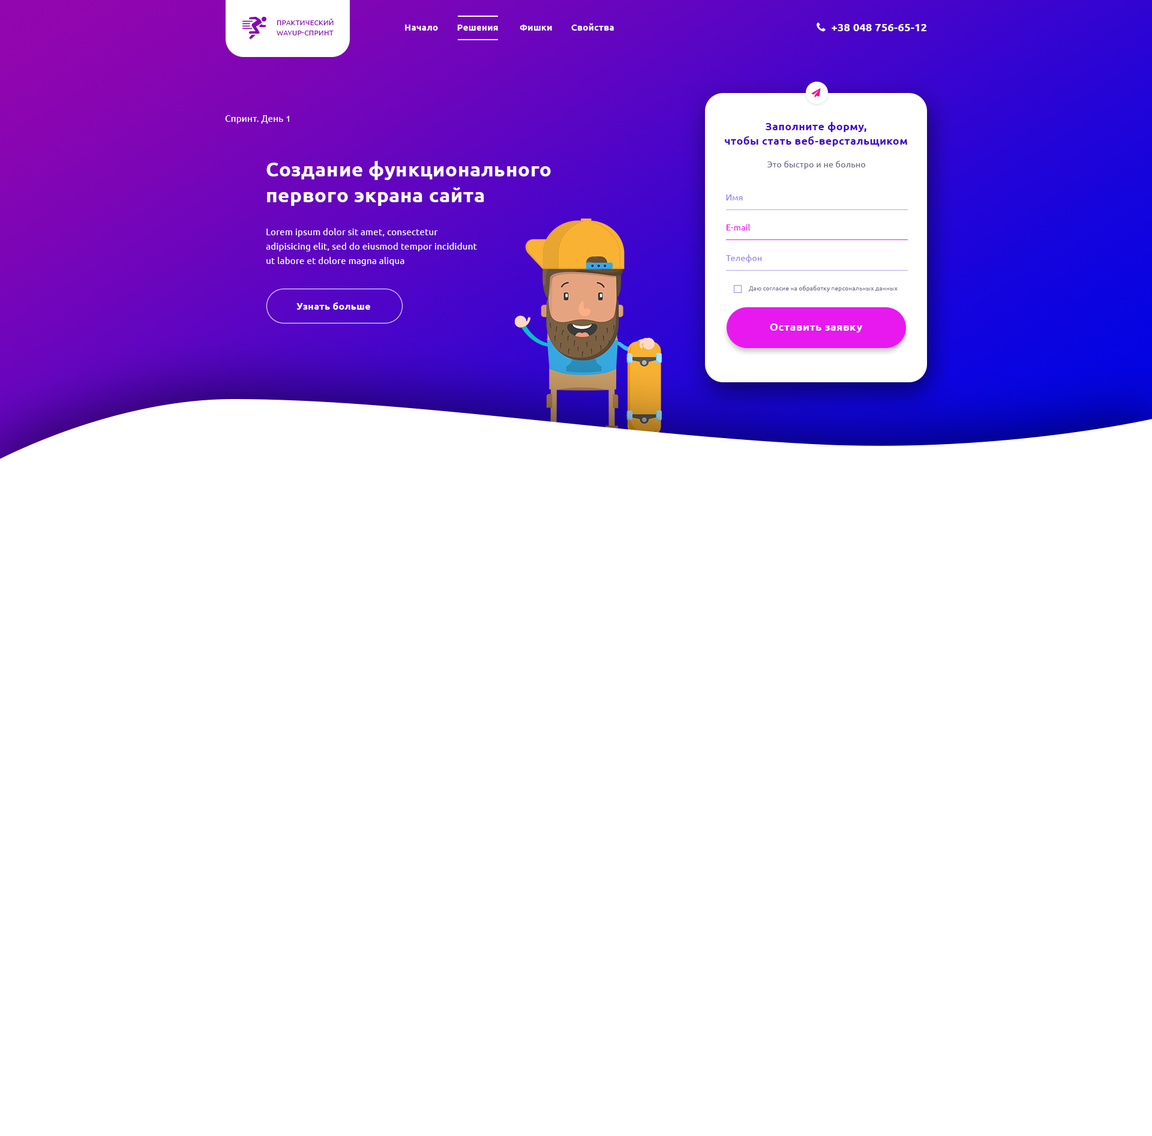
<style>
.page{position:relative;width:1152px;height:1136px;background:#ffffff}
.page>*{position:absolute;margin:0}
.t1{font:7.2px/10.2px "Ubuntu-Regular";letter-spacing:0.02em;color:#8905b2;text-transform:uppercase}
.t2{font:9px "Ubuntu-Bold";letter-spacing:0.02em;color:#ffffff}
.t3{font:9px "Ubuntu-Regular";letter-spacing:0.02em;color:#ffffff}
.t4{font:10.8px/14.4px "Ubuntu-Bold";letter-spacing:0.02em;color:#3e05ce}
.t5{font:19.8px/25.8px "Ubuntu-Bold";letter-spacing:0.02em;color:#ffffff}
.t6{font:8.4px "Ubuntu-Regular";letter-spacing:0.02em;color:#736b86}
.t7{font:8.4px "Ubuntu-Regular";letter-spacing:0.02em;color:#9b8ce2}
.t8{font:9px/14.4px "Ubuntu-Regular";letter-spacing:0.02em;color:#ffffff}
.t9{font:8.4px "Ubuntu-Regular";letter-spacing:0.02em;color:#e719ef}
.t10{font:6px "Ubuntu-Regular";letter-spacing:0.02em;color:#736b86}
.t11{font:9.6px "Ubuntu-Bold";letter-spacing:0.02em;color:#ffffff}
.t12{font:10.8px "Ubuntu-Bold";letter-spacing:0.02em;color:#ffffff}
</style>
<div class="page">
<p class="t1" style="left:277px;top:19px;width:57px;height:16px">Практический<br>wayup-спринт</p>
<p class="t2" style="left:405px;top:23px;width:209px;height:8px">Начало        Решения         Фишки        Свойства</p>
<p class="t3" style="left:225px;top:115px;width:64px;height:9px">Спринт. День 1</p>
<p class="t4" style="left:725px;top:122px;width:182px;height:24px;text-align:center">Заполните форму,<br>чтобы стать веб-верстальщиком</p>
<p class="t5" style="left:266px;top:161px;width:285px;height:45px">Создание функционального<br>первого экрана сайта</p>
<p class="t6" style="left:767px;top:161px;width:99px;height:8px">Это быстро и не больно</p>
<p class="t7" style="left:726px;top:194px;width:17px;height:6px">Имя</p>
<p class="t8" style="left:266px;top:228px;width:211px;height:38px">Lorem ipsum dolor sit amet, consectetur adipisicing elit, sed do eiusmod tempor incididunt ut labore et dolore magna aliqua</p>
<p class="t9" style="left:727px;top:224px;width:24px;height:6px">E-mail</p>
<p class="t7" style="left:726px;top:254px;width:36px;height:9px">Телефон</p>
<p class="t10" style="left:749px;top:286px;width:149px;height:6px">Даю согласие на обработку персональных данных</p>
<p class="t11" style="left:296px;top:302px;width:74px;height:8px">Узнать больше</p>
<p class="t12" style="left:770px;top:323px;width:93px;height:9px">Оставить заявку</p>
</div>
